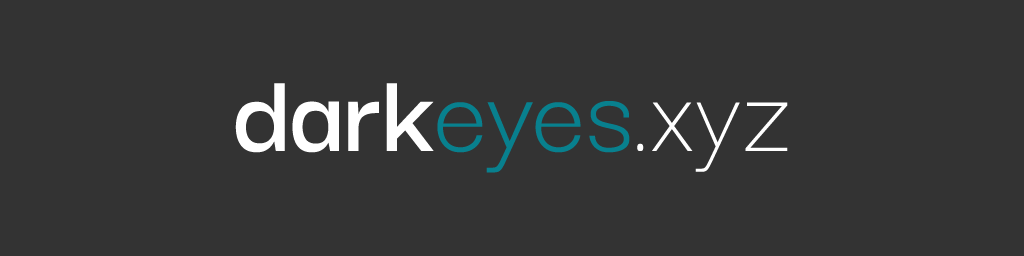
<style>
.page{position:relative;width:1024px;height:256px;background:#333333}
.page>*{position:absolute;margin:0}
.t1{font:120px "DarkerGrotesque-SemiBold";color:#ffffff}
.t2{font:120px "DarkerGrotesque-Regular";color:#08808e}
.t3{font:120px "DarkerGrotesque-Light";color:#ffffff}
</style>
<div class="page">
<p class="t1" style="left:235px;top:83px;width:553px;height:90px">dark<span class="t2">eyes</span><span class="t3">.xyz</span></p>
</div>
